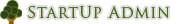
<style>
.page{position:relative;width:180px;height:24px;background:#ffffff}
.page>*{position:absolute;margin:0}
.t1{font:16px "TrajanPro-Regular";letter-spacing:0.05em;color:#4a6b16}
</style>
<div class="page">
<p class="t1" style="left:28px;top:6px;width:141px;height:12px">StartUp Admin</p>
</div>
